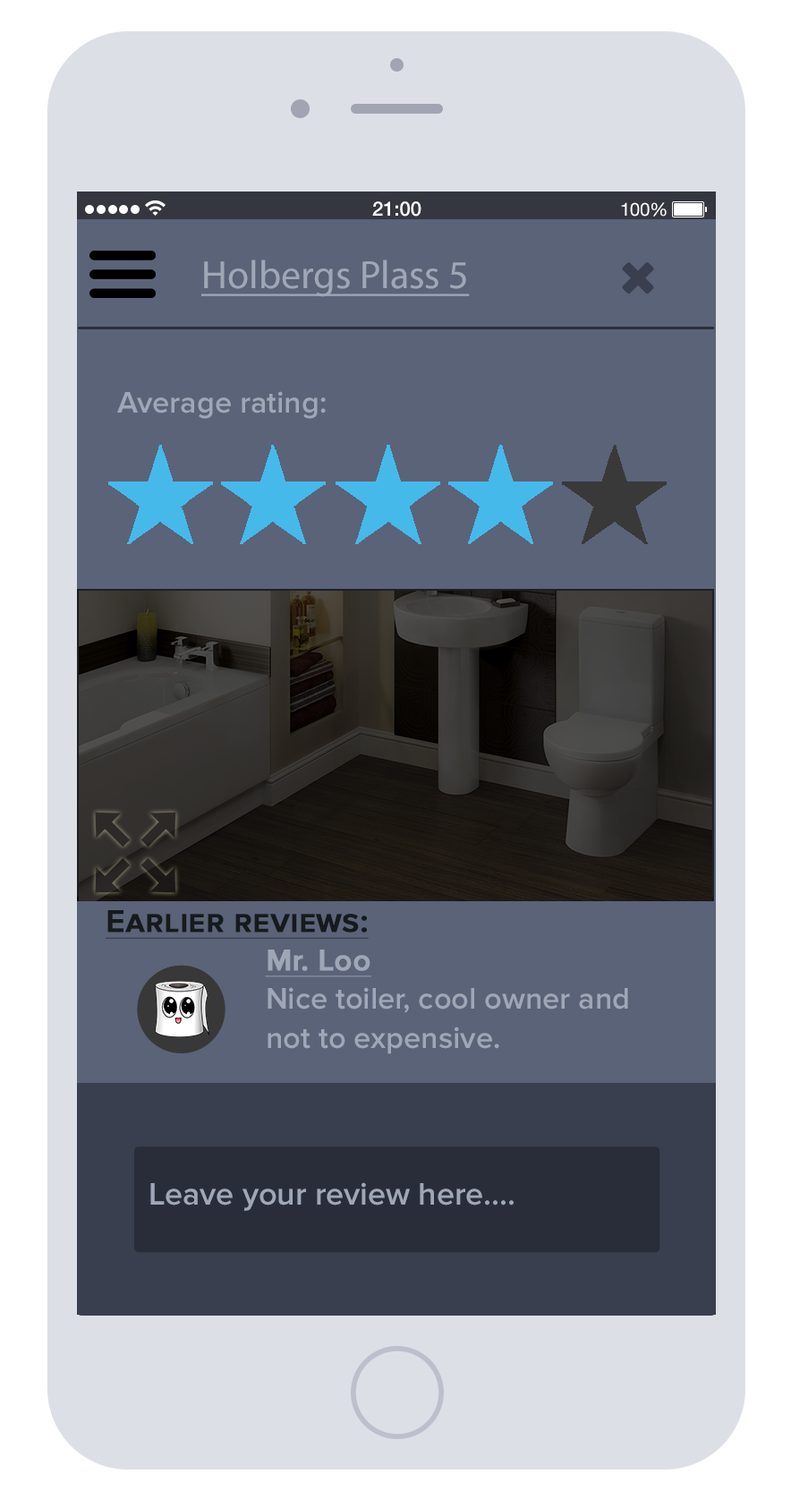
<style>
.page{position:relative;width:791px;height:1508px;background:#5a6378}
.page>*{position:absolute;margin:0}
.t1{font:19.7px "HelveticaNeue-Medium";color:#ffffff}
.t2{font:17.9px "HelveticaNeue";color:#ffffff}
.t3{font:39.6px "MyriadPro-Regular";color:#9fa7b7;text-decoration:underline}
.t4{font:30.8px "ProximaNova-Semibold";color:#9fa7b7}
.t5{font:32.2px "ProximaNova-Semibold";color:#161a1c;font-variant:small-caps;font-weight:bold;text-decoration:underline}
.t6{font:30.8px "ProximaNova-Semibold";color:#9fa7b7;font-weight:bold;text-decoration:underline}
.t7{font:30.8px/39.6px "ProximaNova-Semibold";color:#9fa7b7}
.t8{font:32.2px "ProximaNova-Semibold";color:#9fa7b7}
</style>
<div class="page">
<p class="t1" style="left:372px;top:201px;width:49px;height:16px">21:00</p>
<p class="t2" style="left:621px;top:202px;width:46px;height:15px">100%</p>
<p class="t3" style="left:201px;top:259px;width:269px;height:38px">Holbergs Plass 5</p>
<p class="t4" style="left:117px;top:391px;width:209px;height:28px">Average rating:</p>
<p class="t5" style="left:105px;top:910px;width:264px;height:29px">Earlier reviews:</p>
<p class="t6" style="left:265px;top:949px;width:106px;height:28px">Mr. Loo</p>
<p class="t7" style="left:268px;top:987px;width:360px;height:67px">Nice toiler, cool owner and <br>not to expensive.</p>
<p class="t8" style="left:150px;top:1182px;width:364px;height:29px">Leave your review here....</p>
</div>
